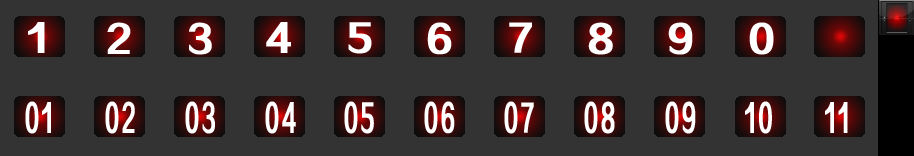
<style>
.page{position:relative;width:914px;height:156px;background:#333333}
.page>*{position:absolute;margin:0}
.t1{font:36px "FZZCHJW--GB1-0";letter-spacing:0.1em;color:#ffffff;font-weight:bold}
.t2{font:36px "FZZCHJW--GB1-0";letter-spacing:0.1em;color:#ffffff;font-weight:bold;scale:0.55 1}
</style>
<div class="page">
<p class="t1" style="left:28px;top:22px;width:17px;height:31px">1</p>
<p class="t1" style="left:107px;top:22px;width:24px;height:32px">2</p>
<p class="t1" style="left:189px;top:22px;width:23px;height:33px">3</p>
<p class="t1" style="left:266px;top:22px;width:25px;height:31px">4</p>
<p class="t1" style="left:348px;top:22px;width:24px;height:32px">5</p>
<p class="t1" style="left:427px;top:22px;width:25px;height:33px">6</p>
<p class="t1" style="left:509px;top:22px;width:23px;height:31px">7</p>
<p class="t1" style="left:588px;top:22px;width:25px;height:33px">8</p>
<p class="t1" style="left:668px;top:22px;width:25px;height:33px">9</p>
<p class="t1" style="left:749px;top:22px;width:25px;height:33px">0</p>
<p class="t2" style="left:25px;top:101px;width:26px;height:33px">01</p>
<p class="t2" style="left:105px;top:101px;width:30px;height:33px">02</p>
<p class="t2" style="left:185px;top:101px;width:30px;height:33px">03</p>
<p class="t2" style="left:265px;top:101px;width:31px;height:33px">04</p>
<p class="t2" style="left:344px;top:101px;width:30px;height:33px">05</p>
<p class="t2" style="left:424px;top:101px;width:31px;height:33px">06</p>
<p class="t2" style="left:504px;top:101px;width:30px;height:33px">07</p>
<p class="t2" style="left:584px;top:101px;width:31px;height:33px">08</p>
<p class="t2" style="left:665px;top:101px;width:31px;height:33px">09</p>
<p class="t2" style="left:745px;top:101px;width:27px;height:33px">10</p>
<p class="t2" style="left:825px;top:102px;width:23px;height:31px">11</p>
</div>
